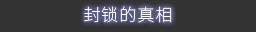
<style>
.page{position:relative;width:256px;height:32px;background:#333333}
.page>*{position:absolute;margin:0}
.t1{font:17px "NotoSansSC-Thin";letter-spacing:0.06em;color:#ffffff}
</style>
<div class="page">
<p class="t1" style="left:84px;top:6px;width:88px;height:17px">封锁的真相</p>
</div>
